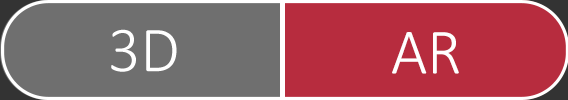
<style>
.page{position:relative;width:568px;height:100px;background:#b72c3e}
.page>*{position:absolute;margin:0}
.t1{font:65px "Calibri-Light";letter-spacing:-0.005em;color:#ffffff}
</style>
<div class="page">
<p class="t1" style="left:111px;top:29px;width:66px;height:43px">3D</p>
<p class="t1" style="left:392px;top:32px;width:67px;height:42px">AR</p>
</div>
